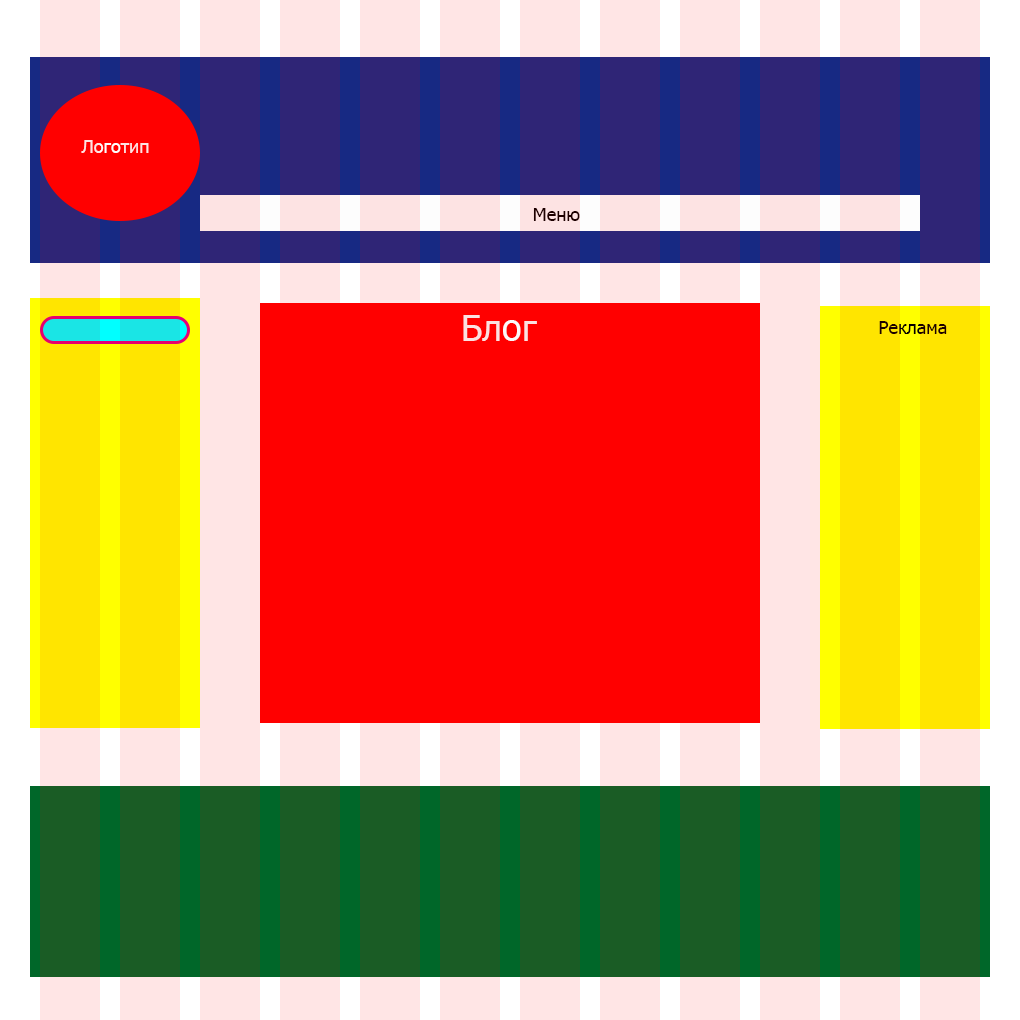
<style>
.page{position:relative;width:1020px;height:1020px;background:#ff0000}
.page>*{position:absolute;margin:0}
.t1{font:18px "Tahoma"}
.t2{font:18px "Tahoma";color:#1d0000}
.t3{font:36px "Tahoma";color:#fbe1e1}
.t4{font:18px "Tahoma";color:#1c0000}
</style>
<div class="page">
<p class="t1" style="left:81px;top:140px;width:68px;height:13px">Логотип</p>
<p class="t2" style="left:520px;top:208px;width:60px;height:13px">ММеню</p>
<p class="t3" style="left:463px;top:315px;width:74px;height:26px">Блог</p>
<p class="t4" style="left:879px;top:321px;width:68px;height:13px">Реклама</p>
</div>
